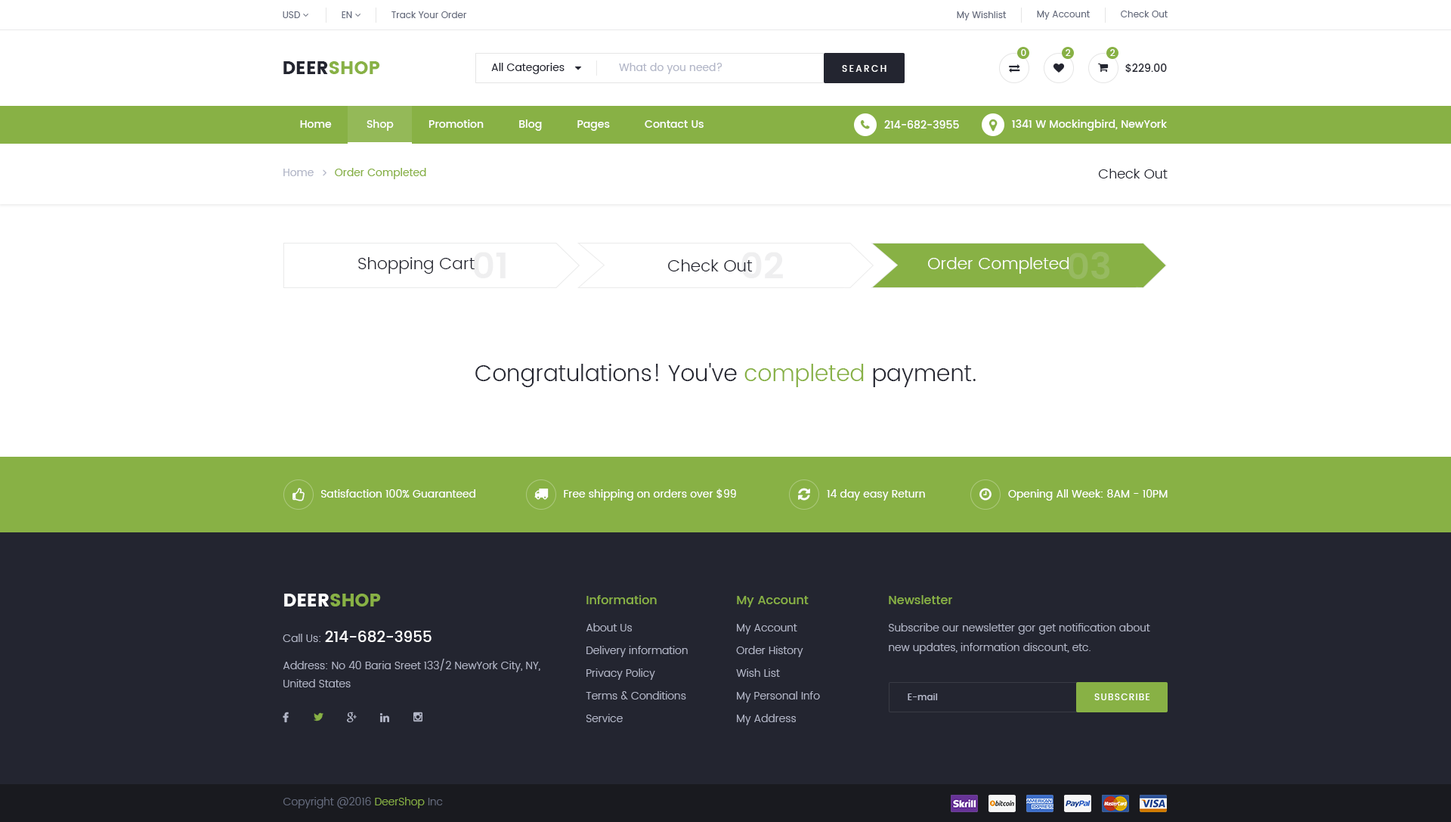
<style>
.page{position:relative;width:1451px;height:822px;background:#ffffff}
.page>*{position:absolute;margin:0}
.t1{font:9.1px "Poppins-Regular";color:#646a7c}
.t2{font:9.1px "Poppins-Medium";color:#ffffff}
.t3{font:18.1px "Poppins";color:#232530;text-transform:uppercase}
.t4{font:18.1px "Poppins";color:#88b145;text-transform:uppercase}
.t5{font:10.6px "Poppins-Regular";color:#232530}
.t6{font:10.6px "Poppins-Regular";color:#b3b7c8}
.t7{font:9.1px "Poppins-Medium";letter-spacing:0.2em;color:#ffffff}
.t8{font:10.6px "Poppins-Medium";color:#232530}
.t9{font:10.6px "Poppins-Medium";color:#ffffff}
.t10{font:13.6px "Poppins-Light";color:#232530}
.t11{font:16.6px "Poppins-Light";color:#232530}
.t12{font:36.3px "Poppins-SemiBold";color:#efeff0;text-transform:uppercase}
.t13{font:16.6px "Poppins-Light";color:#ffffff}
.t14{font:36.3px "Poppins-SemiBold";color:#97ba61;text-transform:uppercase}
.t15{font:22.7px "Poppins-Light";color:#232530}
.t16{font:22.7px "Poppins-Light";color:#88b145}
.t17{font:10.6px "Poppins-Regular";color:#ffffff}
.t18{font:18.1px "Poppins";color:#ffffff;text-transform:uppercase}
.t19{font:10.6px/22.7px "Poppins-Light";color:#b3b7c8}
.t20{font:12.1px/27.2px "Poppins-Medium";color:#88b145}
.t21{font:10.6px/27.2px "Poppins-Light";color:#b3b7c8}
.t22{font:12.1px "Poppins-Medium";color:#88b145}
.t23{font:10.6px/19.7px "Poppins-Light";color:#b3b7c8}
.t24{font:10.6px/18.1px "Poppins-Light";color:#b3b7c8}
.t25{font:15.1px/22.7px "Poppins-Medium";color:#ffffff}
.t26{font:9.1px "Poppins-Medium";color:#b3b7c8}
.t27{font:9.1px "Poppins-Medium";letter-spacing:0.1em;color:#ffffff;text-transform:uppercase}
.t28{font:10.6px "Poppins-Light";color:#646a7c}
.t29{font:10.6px "Poppins-Light";color:#88b145}
</style>
<div class="page">
<p class="t1" style="left:392px;top:11px;width:75px;height:7px">Track Your Order</p>
<p class="t1" style="left:957px;top:11px;width:50px;height:9px">My Wishlist</p>
<p class="t1" style="left:1037px;top:11px;width:53px;height:9px">My Account</p>
<p class="t1" style="left:1121px;top:11px;width:47px;height:6px">Check Out</p>
<p class="t2" style="left:1021px;top:49px;width:5px;height:7px">0</p>
<p class="t2" style="left:1066px;top:49px;width:5px;height:7px">2</p>
<p class="t2" style="left:1110px;top:49px;width:6px;height:7px">2</p>
<p class="t3" style="left:283px;top:61px;width:97px;height:13px">DEER<span class="t4">SHOP</span></p>
<p class="t5" style="left:491px;top:63px;width:74px;height:11px">All Categories</p>
<p class="t6" style="left:619px;top:63px;width:104px;height:11px">What do you need?</p>
<p class="t7" style="left:842px;top:65px;width:45px;height:7px">SEARCH</p>
<p class="t8" style="left:1126px;top:63px;width:41px;height:10px">$229.00</p>
<p class="t9" style="left:300px;top:119px;width:404px;height:12px">Home           Shop           Promotion           Blog           Pages           Contact Us</p>
<p class="t9" style="left:884px;top:120px;width:75px;height:8px">214-682-3955</p>
<p class="t9" style="left:1012px;top:119px;width:155px;height:12px">1341 W Mockingbird, NewYork</p>
<p class="t10" style="left:1098px;top:169px;width:70px;height:9px">Check Out</p>
<p class="t11" style="left:358px;top:257px;width:117px;height:17px">Shopping Cart</p>
<p class="t12" style="left:473px;top:252px;width:33px;height:26px">01</p>
<p class="t13" style="left:928px;top:257px;width:141px;height:17px">Order Completed</p>
<p class="t14" style="left:1068px;top:252px;width:42px;height:27px">03</p>
<p class="t11" style="left:668px;top:259px;width:85px;height:12px">Check Out</p>
<p class="t15" style="left:475px;top:363px;width:501px;height:24px">Congratulations! You've <span class="t16">completed</span> payment.</p>
<p class="t17" style="left:321px;top:489px;width:154px;height:8px">Satisfaction 100% Guaranteed</p>
<p class="t17" style="left:564px;top:488px;width:172px;height:12px">Free shipping on orders over $99</p>
<p class="t17" style="left:827px;top:489px;width:98px;height:11px">14 day easy Return</p>
<p class="t17" style="left:1008px;top:489px;width:160px;height:11px">Opening All Week: 8AM - 10PM</p>
<p class="t18" style="left:284px;top:593px;width:97px;height:13px">DEER<span class="t4">SHOP</span></p>
<p class="t19" style="left:586px;top:595px;width:102px;height:127px"><span class="t20">Information<br></span><span class="t21">About Us<br></span>Delivery information<br>Privacy Policy<br>Terms &amp; Conditions<br>Service</p>
<p class="t19" style="left:736px;top:596px;width:84px;height:129px"><span class="t20">My Account<br></span><span class="t21">My Account<br></span>Order History<br>Wish List<br>My Personal Info<br>My Address</p>
<p class="t22" style="left:889px;top:595px;width:63px;height:9px">Newsletter</p>
<p class="t23" style="left:889px;top:623px;width:261px;height:31px">Subscribe our newsletter gor get notification about new updates, information discount, etc.</p>
<p class="t24" style="left:283px;top:630px;width:257px;height:57px"><span class="t19">Call Us: </span><span class="t25">214-682-3955<br></span><span class="t21">Address: No 40 Baria Sr</span>eet 133/2 NewYork City, NY,  <br>United States</p>
<p class="t26" style="left:908px;top:693px;width:30px;height:7px">E-mail</p>
<p class="t27" style="left:1095px;top:693px;width:55px;height:7px">Subscribe</p>
<p class="t28" style="left:283px;top:797px;width:160px;height:11px">Copyright @2016 <span class="t29">DeerShop</span> Inc</p>
</div>
